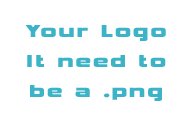
<style>
.page{position:relative;width:191px;height:117px;background:#ffffff}
.page>*{position:absolute;margin:0}
.t1{font:24px/30px "Vipnagorgialla";letter-spacing:0.1em;color:#3db3c8}
</style>
<div class="page">
<p class="t1" style="left:25px;top:25px;width:141px;height:76px;text-align:center">Your Logo<br>It need to<br>be a .png</p>
</div>
